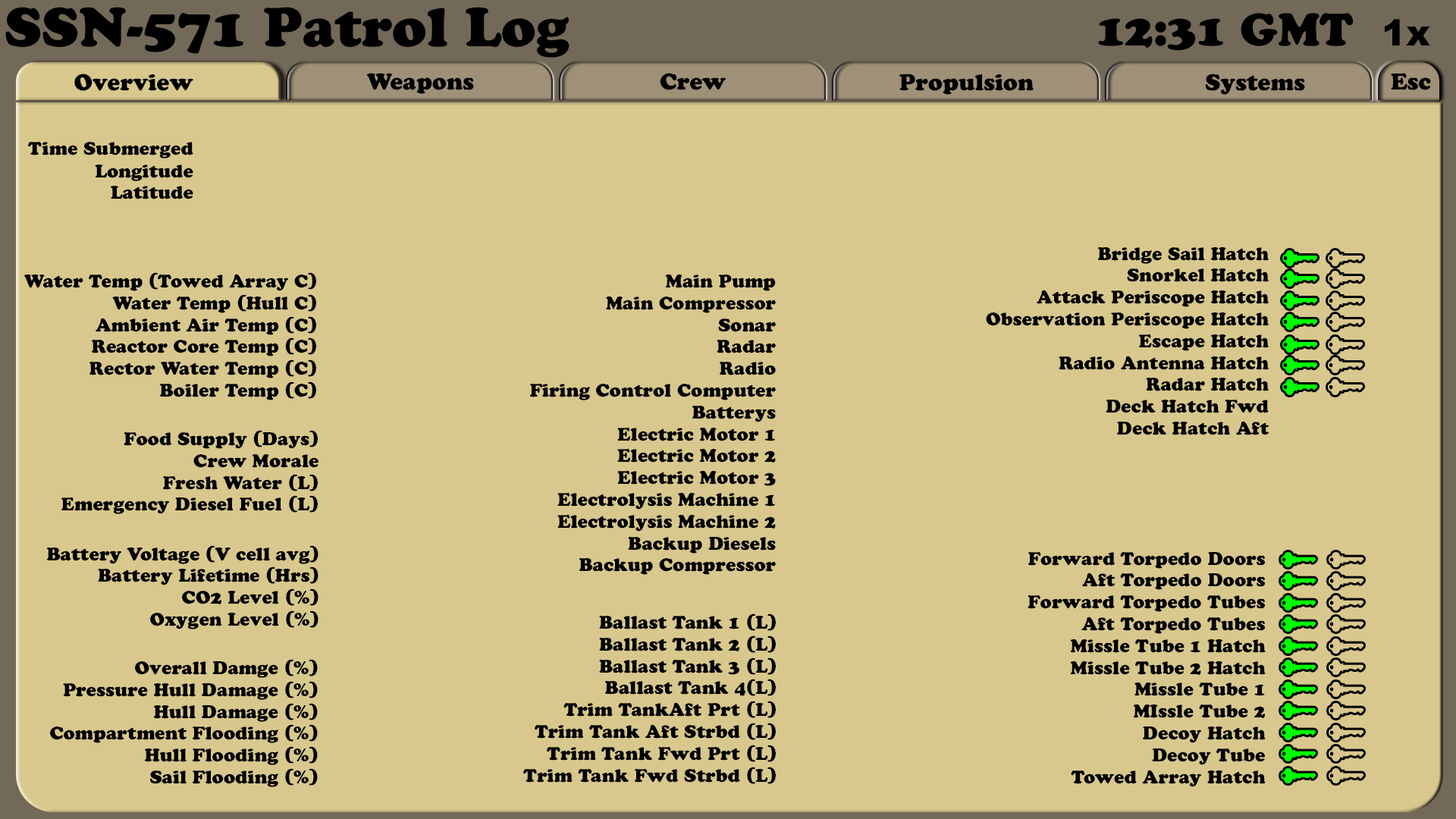
<style>
.page{position:relative;width:1456px;height:819px;background:#d8c88d}
.page>*{position:absolute;margin:0}
.t1{font:54.6px "CooperBlackStd";color:#000000}
.t2{font:45.5px "CooperBlackStd";color:#000000}
.t3{font:36.4px "Arial-Black";color:#000000}
.t4{font:22.7px "CooperBlackStd";color:#000000}
.t5{font:18.2px "CooperBlackStd";color:#000000}
</style>
<div class="page">
<p class="t1" style="left:5px;top:7px;width:565px;height:51px">SSN-571 Patrol Log</p>
<p class="t2" style="left:1098px;top:13px;width:332px;height:38px">12:31 GMT  <span class="t3">1x</span></p>
<p class="t4" style="left:74px;top:74px;width:119px;height:17px">Overview</p>
<p class="t4" style="left:367px;top:73px;width:107px;height:21px">Weapons</p>
<p class="t4" style="left:660px;top:73px;width:66px;height:17px">Crew</p>
<p class="t4" style="left:899px;top:74px;width:135px;height:21px">Propulsion</p>
<p class="t4" style="left:1205px;top:74px;width:100px;height:21px">Systems</p>
<p class="t4" style="left:1391px;top:73px;width:40px;height:17px">Esc</p>
<p class="t5" style="left:28px;top:142px;width:165px;height:16px">Time Submerged</p>
<p class="t5" style="left:95px;top:165px;width:98px;height:34px;text-align:right">Longitude<br>Latitude</p>
<p class="t5" style="left:986px;top:247px;width:283px;height:188px;text-align:right">Bridge Sail Hatch<br>Snorkel Hatch<br>Attack Periscope Hatch<br>Observation Periscope Hatch<br>Escape Hatch<br>Radio Antenna Hatch<br>Radar Hatch<br>Deck Hatch Fwd<br>Deck Hatch Aft</p>
<p class="t5" style="left:24px;top:272px;width:292px;height:128px;text-align:right">Water Temp (Towed Array C)<br>Water Temp (Hull C)<br>Ambient Air Temp (C)<br>Reactor Core Temp (C)<br>Rector Water Temp (C)<br>Boiler Temp (C)</p>
<p class="t5" style="left:530px;top:275px;width:246px;height:300px;text-align:right">Main Pump<br>Main Compressor<br>Sonar<br>Radar<br>Radio<br>Firing Control Computer<br>Batterys<br>Electric Motor 1<br>Electric Motor 2<br>Electric Motor 3<br>Electrolysis Machine 1<br>Electrolysis Machine 2<br>Backup Diesels<br>Backup Compressor</p>
<p class="t5" style="left:61px;top:430px;width:257px;height:84px;text-align:right">Food Supply (Days)<br>Crew Morale<br>Fresh Water (L)<br>Emergency Diesel Fuel (L)</p>
<p class="t5" style="left:47px;top:545px;width:271px;height:84px;text-align:right">Battery Voltage (V cell avg)<br>Battery Lifetime (Hrs)<br>CO2 Level (%)<br>Oxygen Level (%)</p>
<p class="t5" style="left:1028px;top:552px;width:238px;height:235px;text-align:right">Forward Torpedo Doors<br>Aft Torpedo Doors<br>Forward Torpedo Tubes<br>Aft Torpedo Tubes<br>Missle Tube 1 Hatch<br>Missle Tube 2 Hatch<br>Missle Tube 1<br>MIssle Tube 2<br>Decoy Hatch<br>Decoy Tube<br>Towed Array Hatch</p>
<p class="t5" style="left:523px;top:613px;width:253px;height:171px;text-align:right">Ballast Tank 1 (L)<br>Ballast Tank 2 (L)<br>Ballast Tank 3 (L)<br>Ballast Tank 4(L)<br>Trim TankAft Prt (L)<br>Trim Tank Aft Strbd (L)<br>Trim Tank Fwd Prt (L)<br>Trim Tank Fwd Strbd (L)</p>
<p class="t5" style="left:50px;top:659px;width:268px;height:128px;text-align:right">Overall Damge (%)<br>Pressure Hull Damage (%)<br>Hull Damage (%)<br>Compartment Flooding (%)<br>Hull Flooding (%)<br>Sail Flooding (%)</p>
</div>
